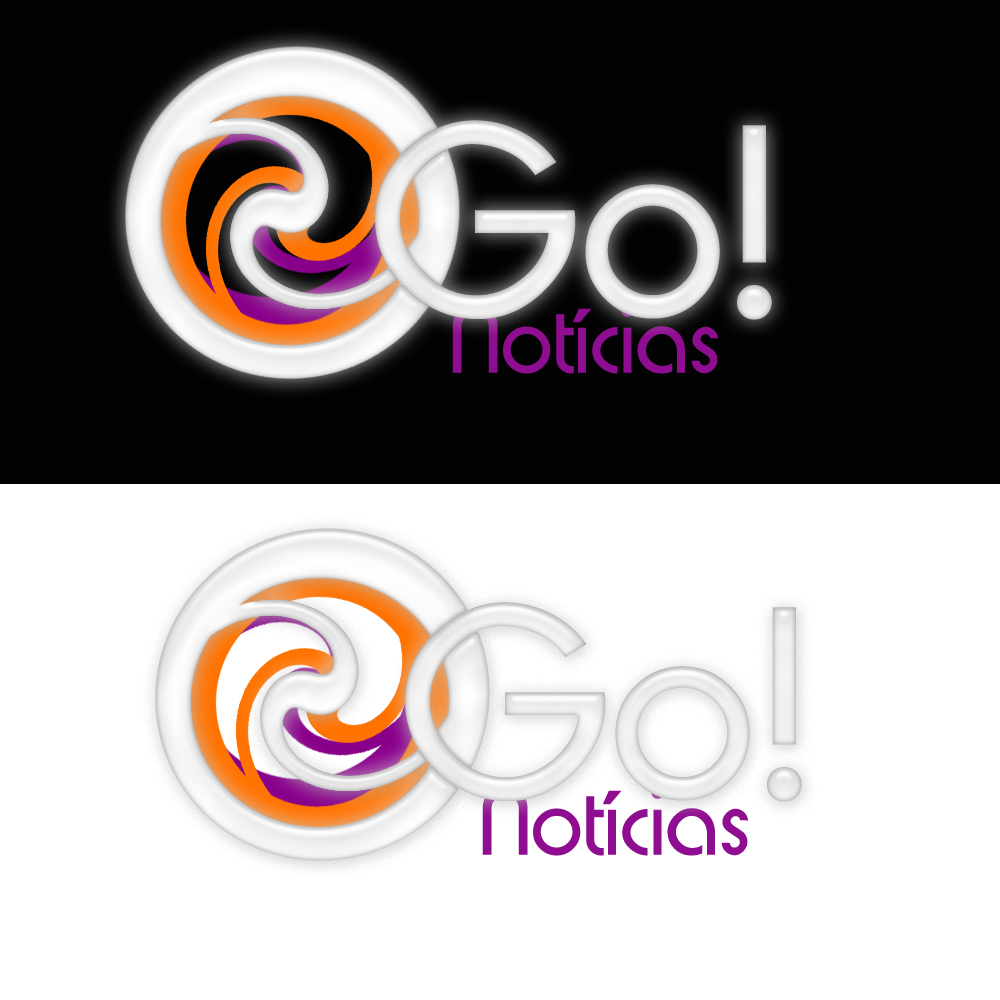
<style>
.page{position:relative;width:1000px;height:1000px;background:#ffffff}
.page>*{position:absolute;margin:0}
.t1{font:280px "Xpressive";color:#ececec}
.t2{font:98.5px "Xpressive";color:#8e0d90}
</style>
<div class="page">
<p class="t1" style="left:375px;top:120px;width:397px;height:200px">Go!</p>
<p class="t2" style="left:452px;top:304px;width:266px;height:70px">Notícias</p>
<p class="t1" style="left:405px;top:602px;width:397px;height:200px">Go!</p>
<p class="t2" style="left:482px;top:786px;width:266px;height:70px">Notícias</p>
</div>
